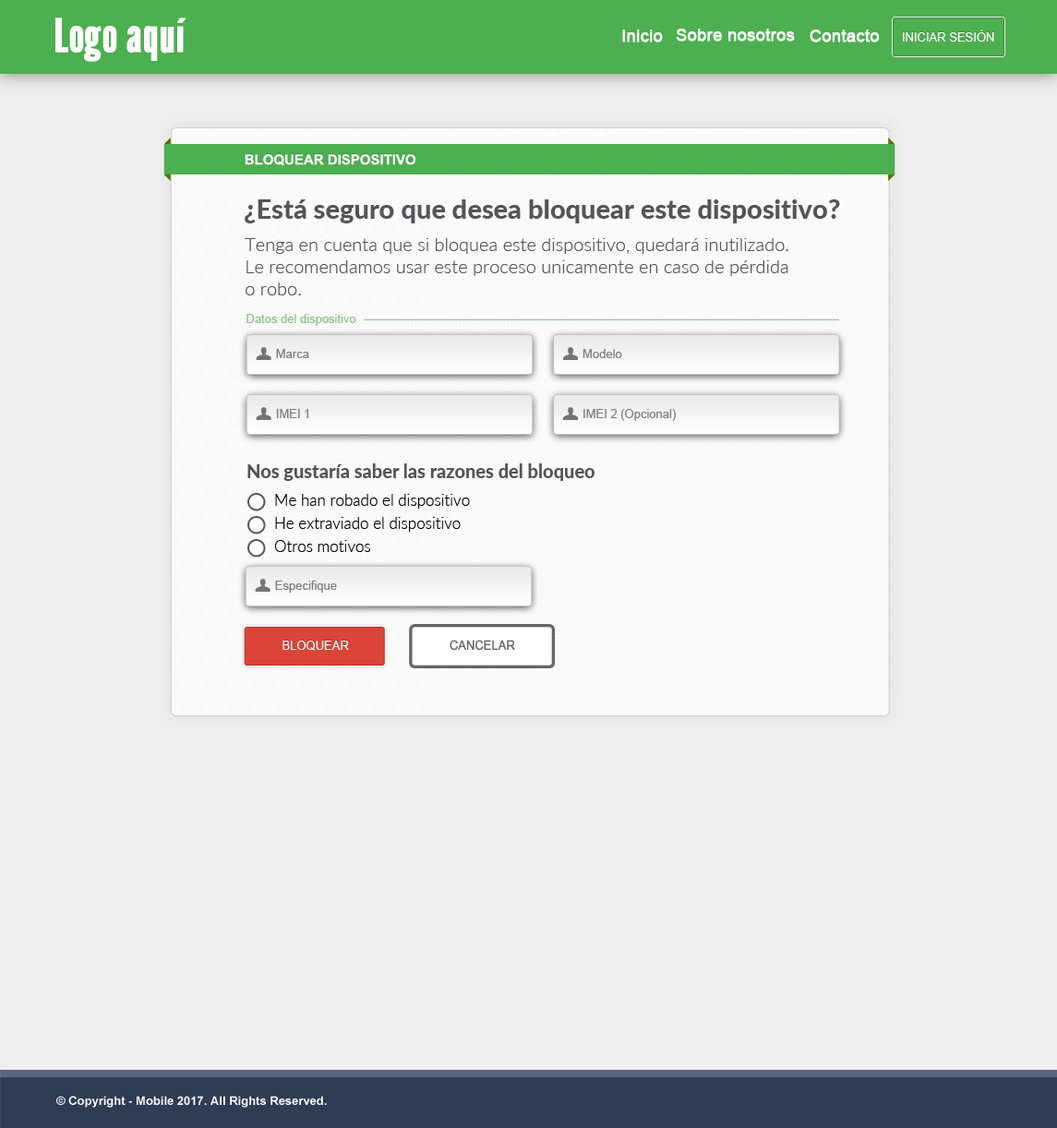
<style>
.page{position:relative;width:1057px;height:1128px;background:#eeeeee}
.page>*{position:absolute;margin:0}
.t1{font:46.2px "LeagueGothic-Regular";color:#ffffff;font-weight:bold}
.t2{font:16.6px "ArialMT";color:#ffffff;font-weight:bold}
.t3{font:12px "ArialMT";color:#ffffff;text-transform:uppercase}
.t4{font:13.8px "Arial-BoldMT";color:#ffffff;text-transform:uppercase}
.t5{font:26.8px "Lato-Heavy";color:#555459}
.t6{font:18.5px "Lato-Light";color:#555459}
.t7{font:12px "ArialMT";color:#8ac38c}
.t8{font:12px "ArialMT";color:#7e7e7e}
.t9{font:18.5px "Lato-Heavy";color:#555459}
.t10{font:15.7px "Lato-Light";color:#000000}
.t11{font:12px "ArialMT";color:#666666;text-transform:uppercase}
.t12{font:12px "Arial-BoldMT";color:#ffffff}
</style>
<div class="page">
<p class="t1" style="left:55px;top:18px;width:131px;height:44px">Logo aquí</p>
<p class="t2" style="left:622px;top:30px;width:41px;height:12px">Inicio</p>
<p class="t2" style="left:676px;top:29px;width:119px;height:13px">Sobre nosotros</p>
<p class="t2" style="left:810px;top:30px;width:70px;height:12px">Contacto</p>
<p class="t3" style="left:903px;top:30px;width:91px;height:12px">Iniciar Sesión</p>
<p class="t4" style="left:245px;top:154px;width:171px;height:12px">Bloquear Dispositivo</p>
<p class="t5" style="left:245px;top:199px;width:595px;height:24px">¿Está seguro que desea bloquear este dispositivo?</p>
<p class="t6" style="left:245px;top:238px;width:543px;height:57px">Tenga en cuenta que si bloquea este dispositivo, quedará inutilizado.<br>Le recomendamos usar este proceso unicamente en caso de pérdida<br>o robo.</p>
<p class="t7" style="left:246px;top:314px;width:110px;height:12px">Datos del dispositivo</p>
<p class="t8" style="left:276px;top:349px;width:33px;height:9px">Marca</p>
<p class="t8" style="left:583px;top:349px;width:39px;height:9px">Modelo</p>
<p class="t8" style="left:276px;top:409px;width:32px;height:9px">IMEI 1</p>
<p class="t8" style="left:583px;top:409px;width:93px;height:12px">IMEI 2 (Opcional)</p>
<p class="t9" style="left:247px;top:463px;width:348px;height:18px">Nos gustaría saber las razones del bloqueo</p>
<p class="t10" style="left:275px;top:494px;width:195px;height:15px">Me han robado el dispositivo</p>
<p class="t10" style="left:275px;top:517px;width:186px;height:15px">He extraviado el dispositivo</p>
<p class="t10" style="left:274px;top:540px;width:96px;height:12px">Otros motivos</p>
<p class="t8" style="left:275px;top:581px;width:62px;height:12px">Especifique</p>
<p class="t3" style="left:282px;top:641px;width:67px;height:10px">bloquear</p>
<p class="t11" style="left:450px;top:641px;width:65px;height:9px">cancelar</p>
<p class="t12" style="left:56px;top:1096px;width:271px;height:12px">© Copyright - Mobile 2017. All Rights Reserved.</p>
</div>
